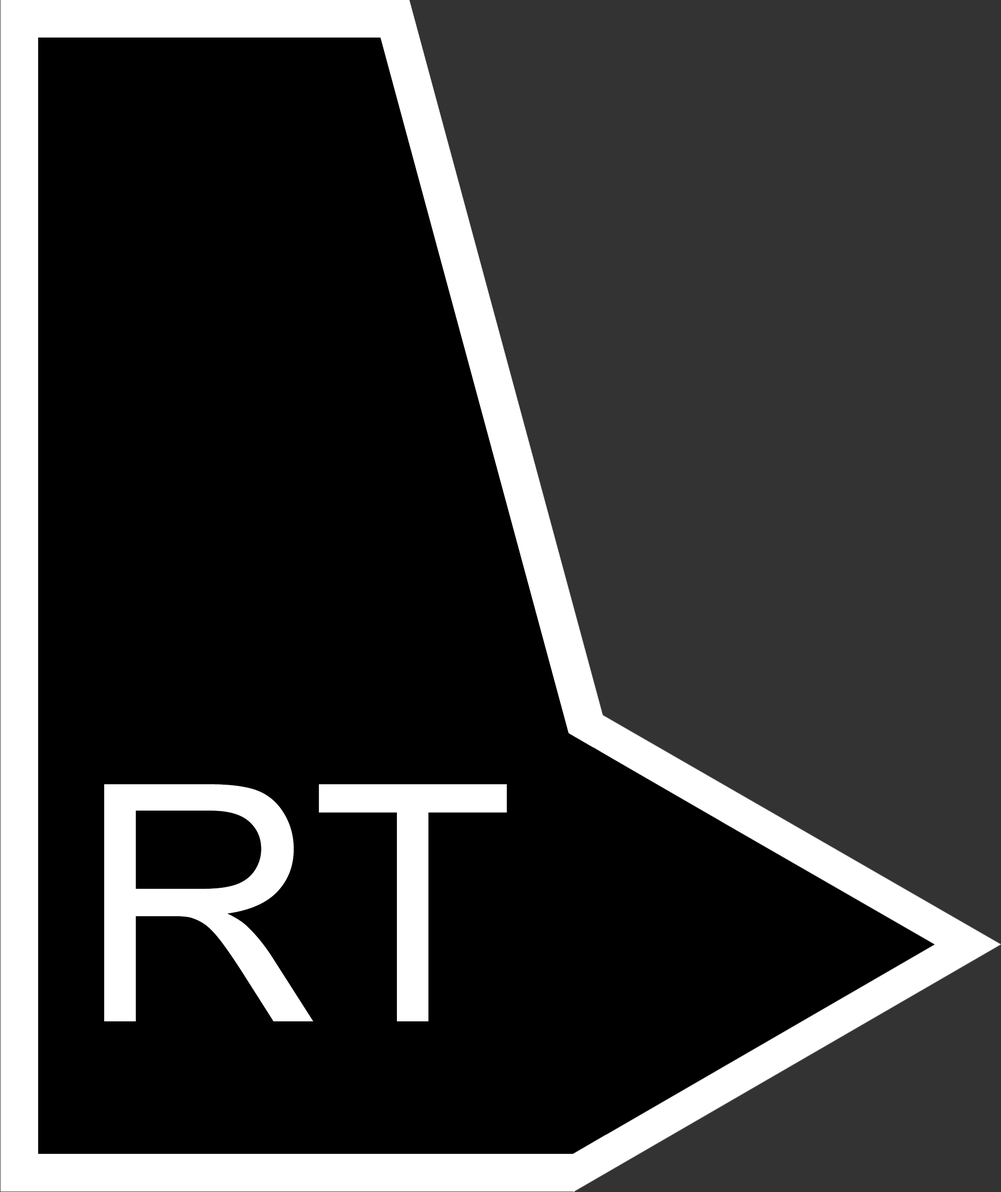
<style>
.page{position:relative;width:1001px;height:1192px;background:#000000}
.page>*{position:absolute;margin:0}
.t1{font:330.8px "ArialMT";color:#ffffff}
</style>
<div class="page">
<p class="t1" style="left:104px;top:784px;width:403px;height:237px">RT</p>
</div>
